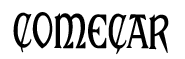
<style>
.page{position:relative;width:185px;height:59px;background:#ffffff}
.page>*{position:absolute;margin:0}
.t1{font:51.4px "Cabaletta";color:#000000;scale:0.81 1}
</style>
<div class="page">
<p class="t1" style="left:13px;top:12px;width:156px;height:43px;rotate:1deg">ComeÇar</p>
</div>
